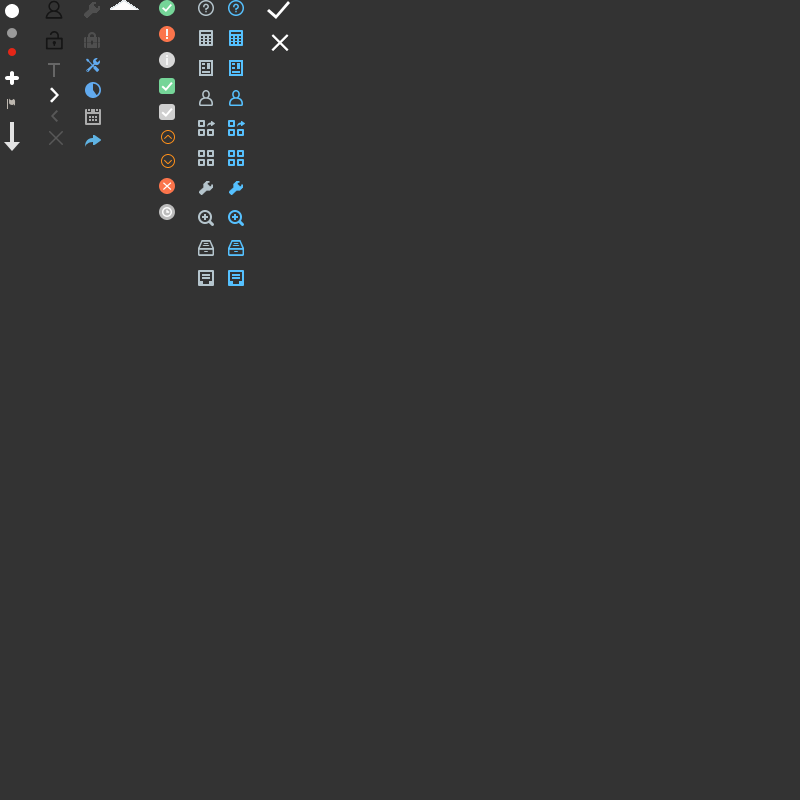
<style>
.page{position:relative;width:800px;height:800px;background:#333333}
.page>*{position:absolute;margin:0}
.t1{font:30px "HiraginoSansGB-W3";letter-spacing:0.05em;color:#ffffff}
.t2{font:12.8px "HiraginoSansGB-W3";letter-spacing:0.05em;color:#ffffff;scale:1.11 1}
</style>
<div class="page">
<p class="t1" style="left:271px;top:34px;width:18px;height:17px">×</p>
<p class="t2" style="left:163px;top:182px;width:9px;height:8px">×</p>
</div>
